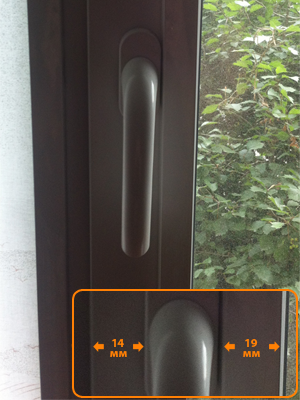
<style>
.page{position:relative;width:300px;height:400px}
.page>*{position:absolute;margin:0}
.t1{font:12px "MyriadPro-Bold";color:#ff8004}
</style>
<div class="page">
<p class="t1" style="left:112px;top:339px;width:12px;height:8px">14</p>
<p class="t1" style="left:245px;top:339px;width:13px;height:8px">19</p>
<p class="t1" style="left:110px;top:351px;width:17px;height:6px">мм</p>
<p class="t1" style="left:243px;top:351px;width:17px;height:6px">мм</p>
</div>
